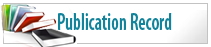
<style>
.page{position:relative;width:211px;height:47px;background:#ffffff}
.page>*{position:absolute;margin:0}
.t1{font:24px "MyriadPro-SemiboldCond";color:#11839a;scale:0.78 1}
</style>
<div class="page">
<p class="t1" style="left:58px;top:13px;width:114px;height:17px">Publication Record</p>
</div>
